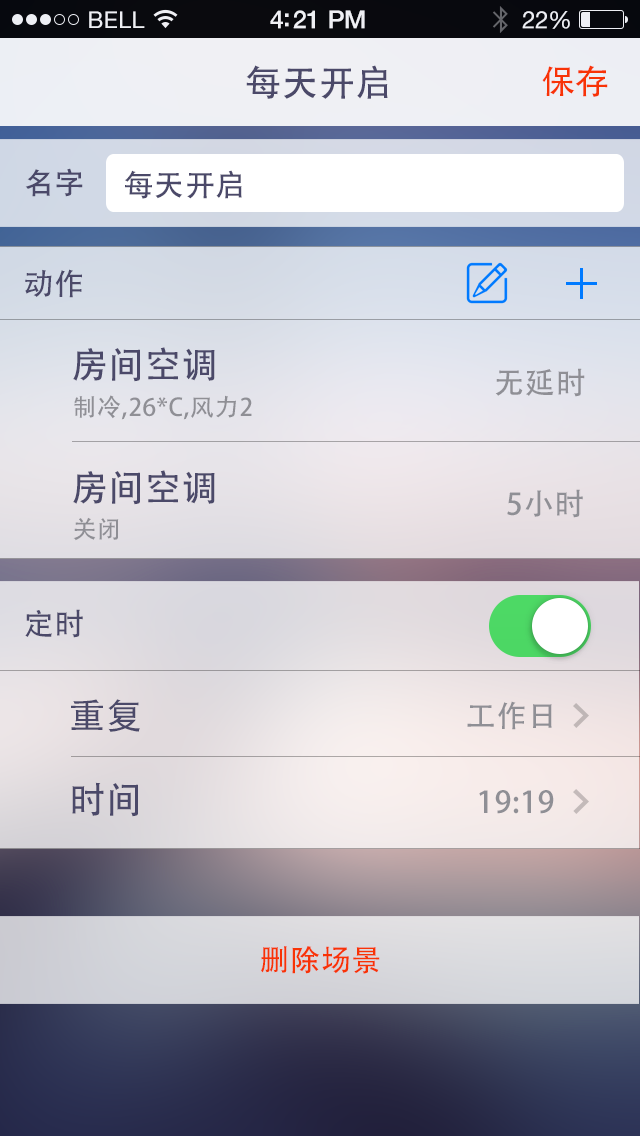
<style>
.page{position:relative;width:640px;height:1136px}
.page>*{position:absolute;margin:0}
.t1{font:23px "HelveticaNeue";letter-spacing:0.02em;color:#ffffff}
.t2{font:25px "HelveticaNeue-Medium";letter-spacing:-0.02em;color:#ffffff}
.t3{font:24px "HelveticaNeue";letter-spacing:-0.02em;color:#ffffff}
.t4{font:36px "AdobeHeitiStd-Regular";letter-spacing:0.025em;color:#4b4969}
.t5{font:34px "AdobeHeitiStd-Regular";color:#f83306}
.t6{font:30px "AdobeHeitiStd-Regular";letter-spacing:0.025em;color:#4b4969}
.t7{font:30px "AdobeHeitiStd-Regular";letter-spacing:0.025em;color:#8f8f95}
.t8{font:24px "AdobeHeitiStd-Regular";letter-spacing:0.025em;color:#8f8f95}
.t9{font:30px "AdobeHeitiStd-Regular";letter-spacing:0.025em;color:#f83306}
</style>
<div class="page">
<p class="t1" style="left:89px;top:11px;width:56px;height:17px">BELL</p>
<p class="t2" style="left:270px;top:10px;width:95px;height:19px">4:21 PM</p>
<p class="t3" style="left:522px;top:11px;width:48px;height:18px">22%</p>
<p class="t4" style="left:246px;top:65px;width:142px;height:34px">每天开启</p>
<p class="t5" style="left:542px;top:65px;width:66px;height:32px">保存</p>
<p class="t6" style="left:25px;top:168px;width:58px;height:29px">名字</p>
<p class="t6" style="left:125px;top:170px;width:117px;height:29px">每天开启</p>
<p class="t6" style="left:25px;top:269px;width:57px;height:29px">动作</p>
<p class="t4" style="left:73px;top:347px;width:142px;height:35px">房间空调</p>
<p class="t7" style="left:495px;top:368px;width:90px;height:29px">无延时</p>
<p class="t8" style="left:74px;top:395px;width:178px;height:25px">制冷,26*C,风力2</p>
<p class="t4" style="left:73px;top:470px;width:142px;height:35px">房间空调</p>
<p class="t7" style="left:507px;top:489px;width:76px;height:29px">5小时</p>
<p class="t8" style="left:73px;top:517px;width:46px;height:24px">关闭</p>
<p class="t6" style="left:25px;top:609px;width:58px;height:29px">定时</p>
<p class="t4" style="left:71px;top:699px;width:69px;height:33px">重复</p>
<p class="t7" style="left:467px;top:701px;width:85px;height:29px">工作日</p>
<p class="t4" style="left:72px;top:782px;width:66px;height:35px">时间</p>
<p class="t7" style="left:479px;top:790px;width:75px;height:24px">19:19</p>
<p class="t9" style="left:261px;top:946px;width:119px;height:28px">删除场景</p>
</div>
